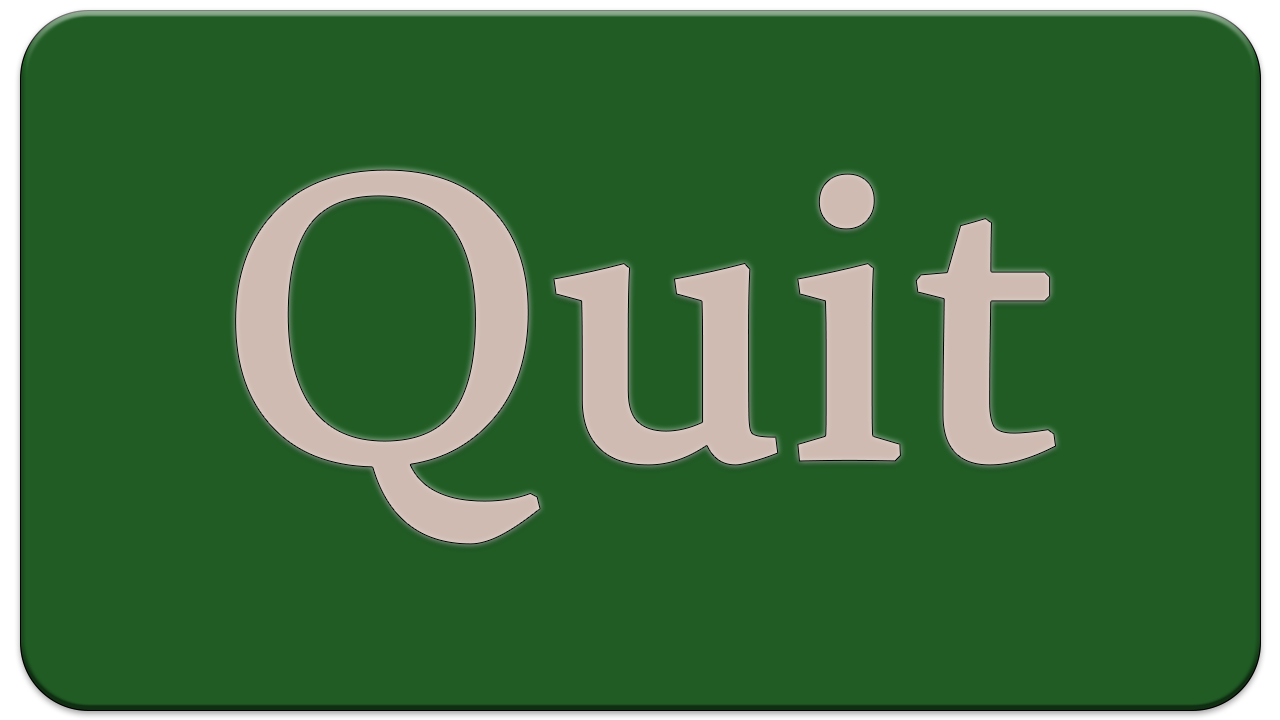
<style>
.page{position:relative;width:1280px;height:720px;background:#205c24}
.page>*{position:absolute;margin:0}
.t1{font:400px "Constantia";color:#cfbbb2;font-weight:bold}
</style>
<div class="page">
<p class="t1" style="left:235px;top:169px;width:822px;height:376px">Quit</p>
</div>
